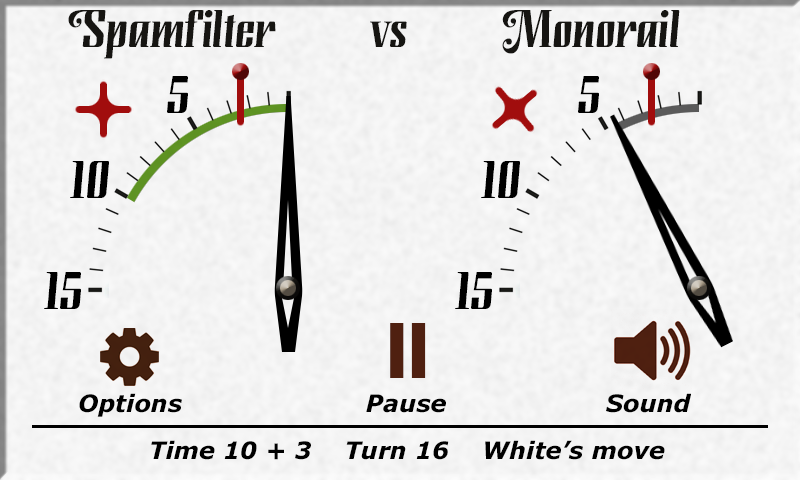
<style>
.page{position:relative;width:800px;height:480px}
.page>*{position:absolute;margin:0}
.t1{font:48px "Modusa-Regular";color:#161512}
.t2{font:48px "Modusa-Regular";color:#000000}
.t3{font:24px "Verdana-BoldItalic";color:#000000}
</style>
<div class="page">
<p class="t1" style="left:68px;top:10px;width:208px;height:49px">Spamfilter</p>
<p class="t1" style="left:502px;top:10px;width:178px;height:44px">Monorail</p>
<p class="t1" style="left:370px;top:21px;width:37px;height:26px">vs</p>
<p class="t2" style="left:167px;top:76px;width:21px;height:37px">5</p>
<p class="t2" style="left:578px;top:76px;width:21px;height:37px">5</p>
<p class="t2" style="left:70px;top:161px;width:39px;height:37px">10</p>
<p class="t2" style="left:481px;top:161px;width:39px;height:37px">10</p>
<p class="t2" style="left:44px;top:272px;width:37px;height:37px">15</p>
<p class="t2" style="left:455px;top:272px;width:37px;height:37px">15</p>
<p class="t3" style="left:79px;top:393px;width:103px;height:24px">Options</p>
<p class="t3" style="left:366px;top:394px;width:80px;height:19px">Pause</p>
<p class="t3" style="left:606px;top:393px;width:85px;height:20px">Sound</p>
<p class="t3" style="left:151px;top:440px;width:514px;height:20px">Time 10 + 3    Turn 16    White’s move</p>
</div>
